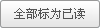
<style>
.page{position:relative;width:100px;height:28px}
.page>*{position:absolute;margin:0}
.t1{font:12px "SimSun";color:#555555}
</style>
<div class="page">
<p class="t1" style="left:14px;top:8px;width:71px;height:11px">全部标为已读</p>
</div>
